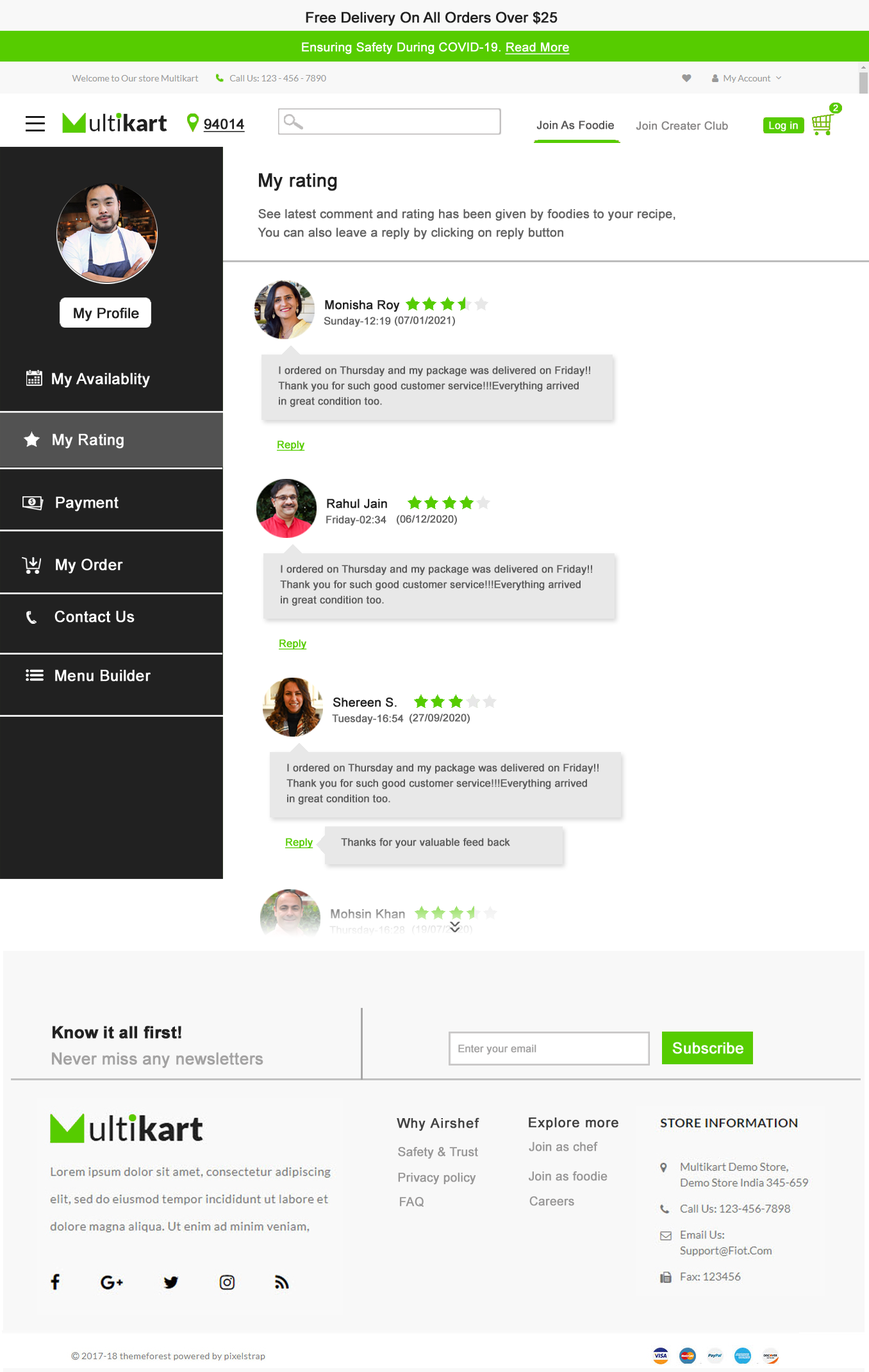
<style>
.page{position:relative;width:869px;height:1372px;background:#ffffff}
.page>*{position:absolute;margin:0}
.t1{font:14.4px "ArialMT";color:#222222;font-weight:bold}
.t2{font:12.3px "ArialMT";color:#ffffff;font-weight:bold}
.t3{font:12.3px "ArialMT";color:#ffffff;font-weight:bold;text-decoration:underline}
.t4{font:9.1px "ArialMT";color:#ffffff;font-weight:bold}
.t5{font:14px "ArialMT";color:#222222;font-weight:bold;text-decoration:underline}
.t6{font:11.2px "ArialMT";color:#585757;font-weight:bold}
.t7{font:11.2px "ArialMT";color:#8a8888;font-weight:bold}
.t8{font:10.3px "ArialMT";color:#ffffff;font-weight:bold}
.t9{font:18.5px "ArialMT";color:#212121;font-weight:bold}
.t10{font:12.3px "ArialMT";color:#636363;font-weight:bold}
.t11{font:12.3px "ArialMT";color:#212121;font-weight:bold}
.t12{font:14.1px "ArialMT";color:#212121;font-weight:bold}
.t13{font:10.3px "ArialMT";color:#636363;font-weight:bold}
.t14{font:15.5px "ArialMT";color:#ffffff;font-weight:bold}
.t15{font:10.3px "ArialMT";color:#5c5c5c;font-weight:bold}
.t16{font:10.3px "ArialMT";color:#56cc00;font-weight:bold;text-decoration:underline}
.t17{font:12.3px "ArialMT";color:#9e9e9e;font-weight:bold}
.t18{font:10.3px "ArialMT";color:#f0f0f0;font-weight:bold}
.t19{font:20.5px "ArialMT";color:#636363;font-weight:bold;scale:0.44 1}
.t20{font:16.5px "Arial-BoldMT";color:#222222;font-weight:bold}
.t21{font:10.2px "ArialMT";color:#a3a2a2;font-weight:bold}
.t22{font:15.4px "ArialMT";color:#ffffff;font-weight:bold}
.t23{font:16.5px "ArialMT";color:#a3a2a2;font-weight:bold}
.t24{font:13.3px "ArialMT";letter-spacing:0.05em;color:#414141;font-weight:bold}
.t25{font:13.3px "ArialMT";letter-spacing:0.05em;color:#3e3e3e;font-weight:bold}
.t26{font:12.1px "ArialMT";color:#989797;font-weight:bold}
.t27{font:12.1px "ArialMT";color:#979696;font-weight:bold}
</style>
<div class="page">
<p class="t1" style="left:306px;top:12px;width:252px;height:14px">Free Delivery On All Orders Over $25</p>
<p class="t2" style="left:302px;top:42px;width:268px;height:12px">Ensuring Safety During COVID-19. <span class="t3">Read More</span></p>
<p class="t4" style="left:833px;top:104px;width:5px;height:8px">2</p>
<p class="t5" style="left:203px;top:119px;width:42px;height:13px">94014</p>
<p class="t6" style="left:537px;top:121px;width:77px;height:8px">Join As Foodie</p>
<p class="t7" style="left:636px;top:121px;width:92px;height:9px">Join Creater Club</p>
<p class="t8" style="left:769px;top:121px;width:29px;height:10px">Log in</p>
<p class="t9" style="left:259px;top:173px;width:78px;height:18px">My rating</p>
<p class="t10" style="left:258px;top:209px;width:418px;height:31px">See latest comment and rating has been given by foodies to your recipe, <br>You can also leave a reply by clicking on reply button</p>
<p class="t11" style="left:325px;top:300px;width:75px;height:12px">Monisha Roy</p>
<p class="t12" style="left:74px;top:308px;width:65px;height:13px">My Profile</p>
<p class="t13" style="left:324px;top:317px;width:67px;height:10px">Sunday-12:19</p>
<p class="t13" style="left:395px;top:316px;width:60px;height:10px">(07/01/2021)</p>
<p class="t14" style="left:52px;top:372px;width:98px;height:16px">My Availablity</p>
<p class="t15" style="left:278px;top:366px;width:312px;height:41px">I ordered on Thursday and my package was delivered on Friday!! <br>Thank you for such good customer service!!!Everything arrived <br>in great condition too.</p>
<p class="t14" style="left:53px;top:433px;width:71px;height:16px">My Rating</p>
<p class="t16" style="left:277px;top:440px;width:28px;height:11px">Reply</p>
<p class="t14" style="left:56px;top:496px;width:63px;height:16px">Payment</p>
<p class="t11" style="left:327px;top:499px;width:60px;height:9px">Rahul Jain</p>
<p class="t13" style="left:326px;top:515px;width:61px;height:11px">Friday-02:34</p>
<p class="t13" style="left:397px;top:515px;width:60px;height:10px">(06/12/2020)</p>
<p class="t14" style="left:56px;top:558px;width:67px;height:16px">My Order</p>
<p class="t15" style="left:280px;top:565px;width:312px;height:41px">I ordered on Thursday and my package was delivered on Friday!! <br>Thank you for such good customer service!!!Everything arrived <br>in great condition too.</p>
<p class="t14" style="left:54px;top:610px;width:81px;height:12px">Contact Us</p>
<p class="t16" style="left:279px;top:639px;width:28px;height:10px">Reply</p>
<p class="t14" style="left:55px;top:669px;width:96px;height:12px">Menu Builder</p>
<p class="t11" style="left:333px;top:697px;width:64px;height:10px">Shereen S.</p>
<p class="t13" style="left:410px;top:713px;width:60px;height:11px">(27/09/2020)</p>
<p class="t13" style="left:332px;top:714px;width:72px;height:10px">Tuesday-16:54</p>
<p class="t15" style="left:287px;top:763px;width:312px;height:41px">I ordered on Thursday and my package was delivered on Friday!! <br>Thank you for such good customer service!!!Everything arrived <br>in great condition too.</p>
<p class="t16" style="left:285px;top:838px;width:28px;height:10px">Reply</p>
<p class="t15" style="left:341px;top:838px;width:169px;height:10px">Thanks for your valuable feed back</p>
<p class="t17" style="left:331px;top:909px;width:74px;height:10px">Mohsin Khan</p>
<p class="t18" style="left:329px;top:926px;width:76px;height:10px">Thursday-16:28</p>
<p class="t19" style="left:450px;top:921px;width:10px;height:11px;rotate:90deg">&gt;&gt;</p>
<p class="t20" style="left:53px;top:1026px;width:128px;height:12px">Know it all first!</p>
<p class="t21" style="left:458px;top:1044px;width:79px;height:10px">Enter your email</p>
<p class="t22" style="left:672px;top:1042px;width:72px;height:12px">Subscribe</p>
<p class="t23" style="left:52px;top:1052px;width:211px;height:16px">Never miss any newsletters</p>
<p class="t24" style="left:397px;top:1117px;width:82px;height:14px">Why Airshef</p>
<p class="t25" style="left:529px;top:1117px;width:90px;height:13px">Explore more</p>
<p class="t26" style="left:529px;top:1142px;width:69px;height:9px">Join as chef</p>
<p class="t27" style="left:398px;top:1147px;width:80px;height:12px">Safety &amp; Trust</p>
<p class="t27" style="left:398px;top:1172px;width:78px;height:13px">Privacy policy</p>
<p class="t26" style="left:529px;top:1171px;width:79px;height:10px">Join as foodie</p>
<p class="t27" style="left:400px;top:1197px;width:24px;height:10px">FAQ</p>
<p class="t26" style="left:529px;top:1196px;width:45px;height:10px">Careers</p>
</div>
